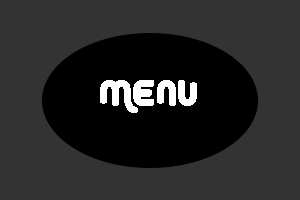
<style>
.page{position:relative;width:300px;height:200px;background:#333333}
.page>*{position:absolute;margin:0}
.t1{font:37.5px "RoundyRainbows";color:#ffffff}
</style>
<div class="page">
<p class="t1" style="left:100px;top:80px;width:97px;height:33px">Menu</p>
</div>
